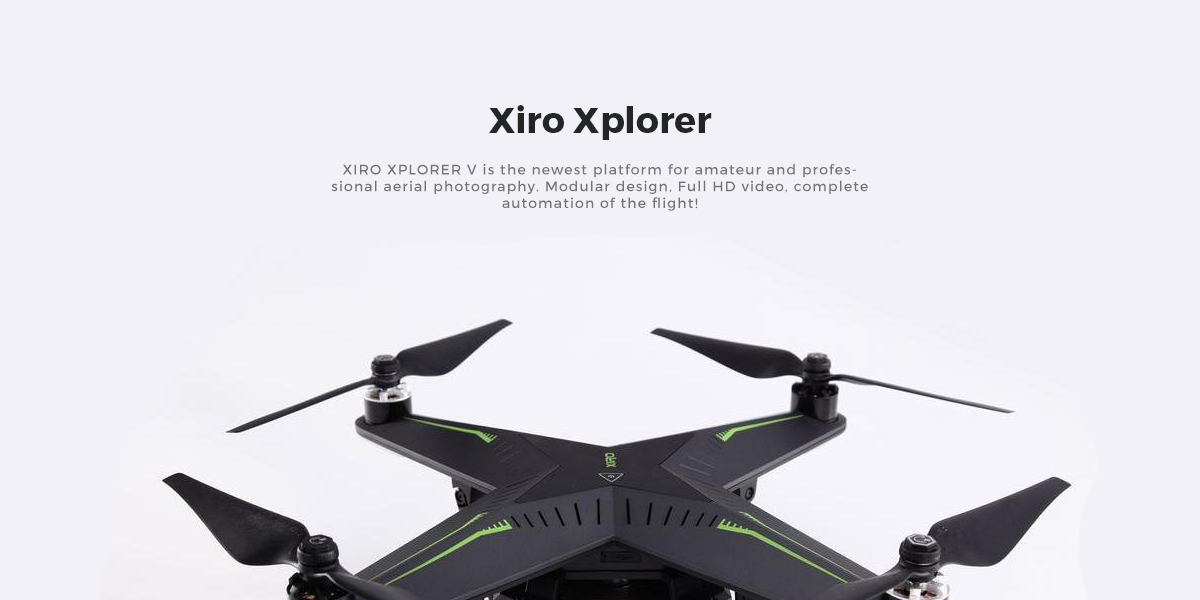
<style>
.page{position:relative;width:1200px;height:600px;background:#f2f1f7}
.page>*{position:absolute;margin:0}
.t1{font:36px "Montserrat-Bold";color:#242526}
.t2{font:14px "Montserrat-Regular";letter-spacing:0.08em;color:#747474}
</style>
<div class="page">
<p class="t1" style="left:489px;top:105px;width:223px;height:35px">Xiro Xplorer</p>
<p class="t2" style="left:331px;top:164px;width:537px;height:47px;text-align:center">XIRO XPLORER V is the newest platform for amateur and professional aerial photography. Modular design, Full HD video, complete automation of the flight!</p>
</div>
